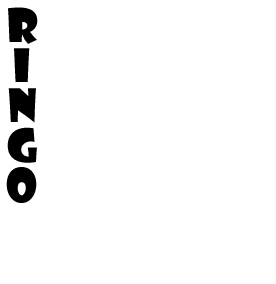
<style>
.page{position:relative;width:276px;height:284px;background:#ffffff}
.page>*{position:absolute;margin:0}
.t1{font:45px/40px "ShowcardGothic-Reg";color:#000000}
</style>
<div class="page">
<p class="t1" style="left:6px;top:7px;width:32px;height:196px;text-align:center">R<br>I<br>N<br>G<br>O</p>
</div>
